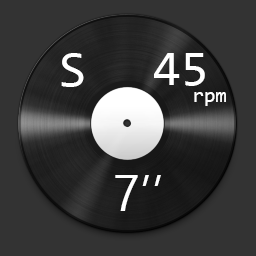
<style>
.page{position:relative;width:256px;height:256px;background:#333333}
.page>*{position:absolute;margin:0}
.t1{font:50px "Consolas";color:#ffffff}
.t2{font:20.8px "Consolas";color:#ffffff}
.t3{font:50px "Ebrima";color:#ffffff}
</style>
<div class="page">
<p class="t1" style="left:61px;top:53px;width:23px;height:34px">S</p>
<p class="t1" style="left:154px;top:53px;width:51px;height:33px">45</p>
<p class="t2" style="left:194px;top:92px;width:32px;height:14px">rpm</p>
<p class="t3" style="left:115px;top:175px;width:46px;height:36px">7’’</p>
</div>
